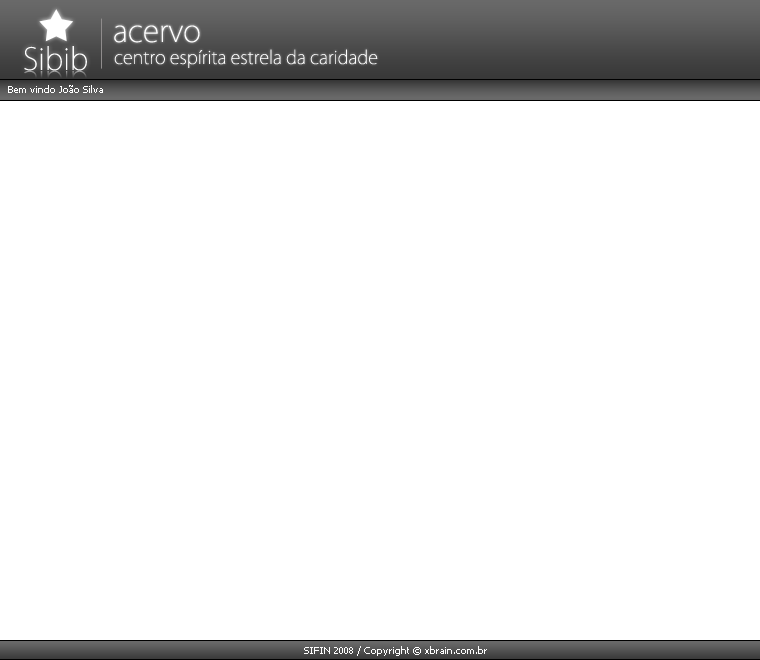
<style>
.page{position:relative;width:760px;height:660px;background:#ffffff}
.page>*{position:absolute;margin:0}
.t1{font:30px "KozGoPro-ExtraLight";color:#ffffff}
.t2{font:18px "KozGoPro-ExtraLight";color:#ffffff}
.t3{font:10px "Tahoma";color:#ffffff}
</style>
<div class="page">
<p class="t1" style="left:114px;top:25px;width:86px;height:18px">acervo</p>
<p class="t1" style="left:24px;top:46px;width:63px;height:25px">Sibib</p>
<p class="t2" style="left:114px;top:49px;width:264px;height:19px">centro espírita estrela da caridade</p>
<p class="t3" style="left:8px;top:85px;width:95px;height:8px">Bem vindo João Silva</p>
<p class="t3" style="left:304px;top:646px;width:183px;height:10px">SIFIN 2008 / Copyright © xbrain.com.br</p>
</div>
